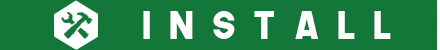
<style>
.page{position:relative;width:440px;height:50px;background:#127738}
.page>*{position:absolute;margin:0}
.t1{font:37.5px "TheNextFont";letter-spacing:0.48em;color:#ffffff}
</style>
<div class="page">
<p class="t1" style="left:143px;top:11px;width:248px;height:28px">INSTALL</p>
</div>
